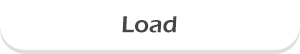
<style>
.page{position:relative;width:300px;height:54px;background:#ffffff}
.page>*{position:absolute;margin:0}
.t1{font:24px "ErasITC-Demi";color:#464646}
</style>
<div class="page">
<p class="t1" style="left:122px;top:16px;width:55px;height:17px">Load</p>
</div>
